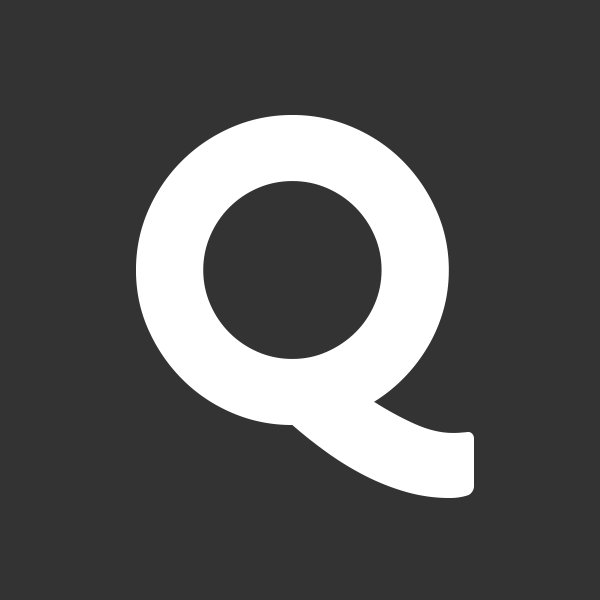
<style>
.page{position:relative;width:600px;height:600px;background:#333333}
.page>*{position:absolute;margin:0}
.t1{font:400px "Paralex-Regular2";color:#ffffff}
</style>
<div class="page">
<p class="t1" style="left:136px;top:115px;width:338px;height:383px">Q</p>
</div>
